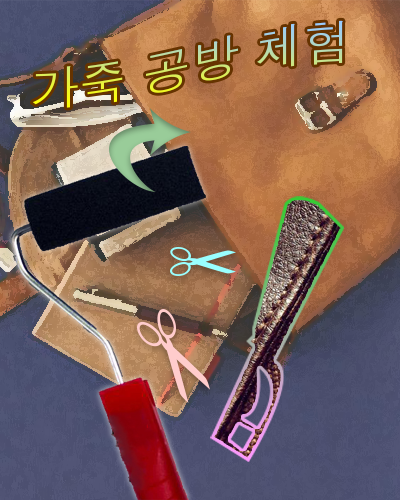
<style>
.page{position:relative;width:400px;height:500px}
.page>*{position:absolute;margin:0}
.t1{font:48px "Dotum"}
</style>
<div class="page">
<p class="t1" style="left:32px;top:20px;width:311px;height:88px">가죽 공방 체험</p>
</div>
